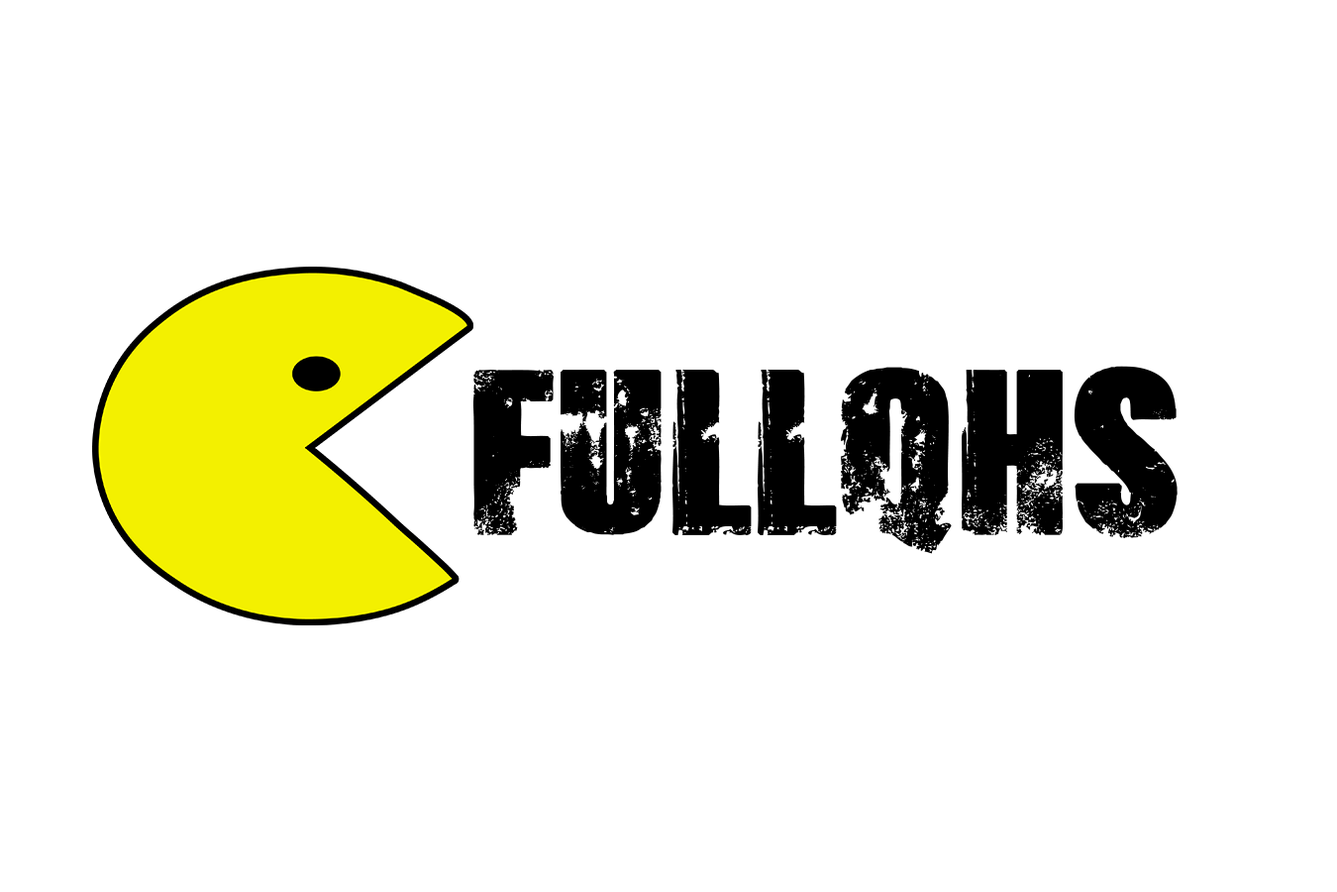
<style>
.page{position:relative;width:1337px;height:892px;background:#ffffff}
.page>*{position:absolute;margin:0}
.t1{font:198.1px "Broken-Detroit";color:#000000}
</style>
<div class="page">
<p class="t1" style="left:473px;top:366px;width:705px;height:188px">fullqhs</p>
</div>
